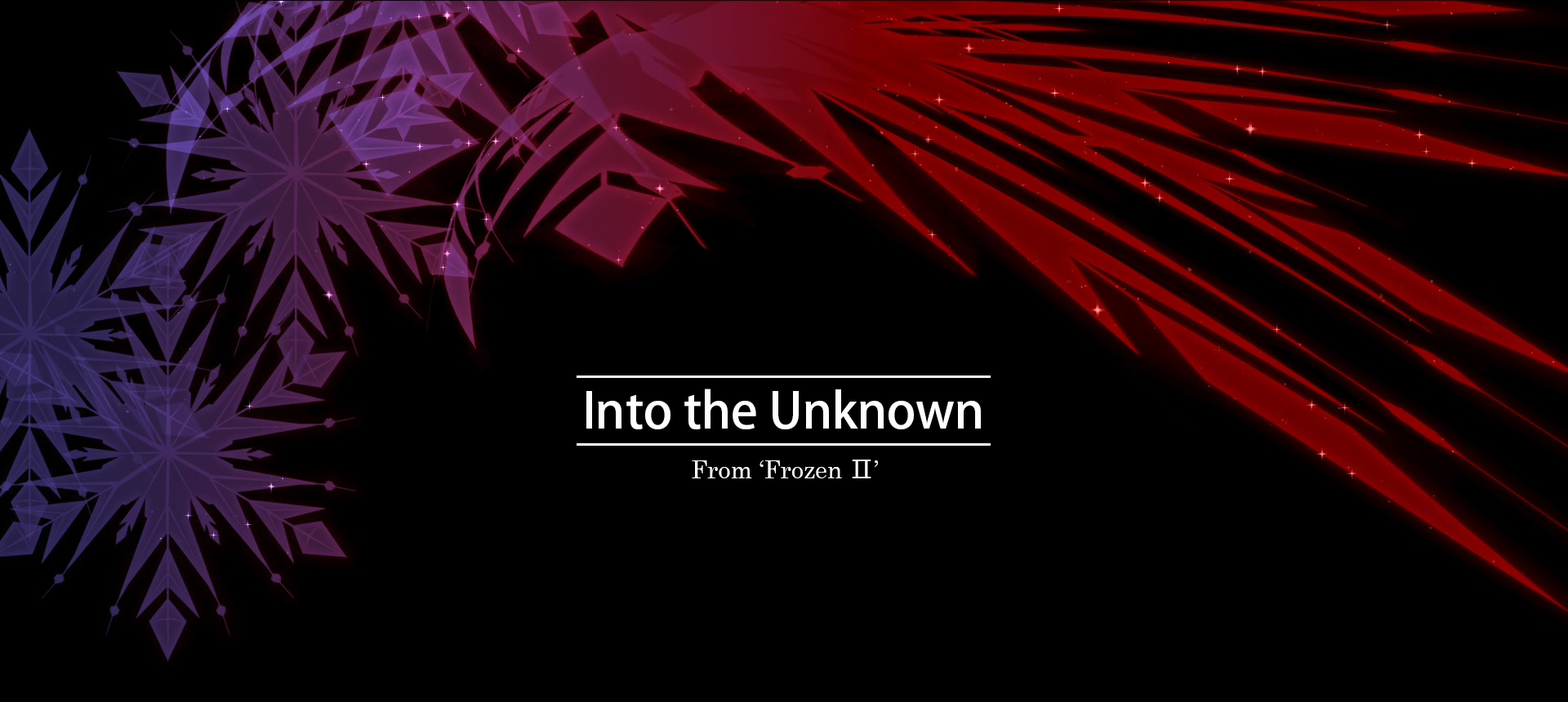
<style>
.page{position:relative;width:1568px;height:702px;background:#000000}
.page>*{position:absolute;margin:0}
.t1{font:49px "AdobeHeitiStd-Regular";color:#fefefe}
.t2{font:24.5px "Century";color:#fefefe}
.t3{font:24.5px "MicrosoftYaHeiUI";color:#fefefe}
</style>
<div class="page">
<p class="t1" style="left:586px;top:389px;width:395px;height:41px">Into the Unknown</p>
<p class="t2" style="left:692px;top:460px;width:186px;height:19px">From ‘Frozen <span class="t3">Ⅱ</span>’</p>
</div>
